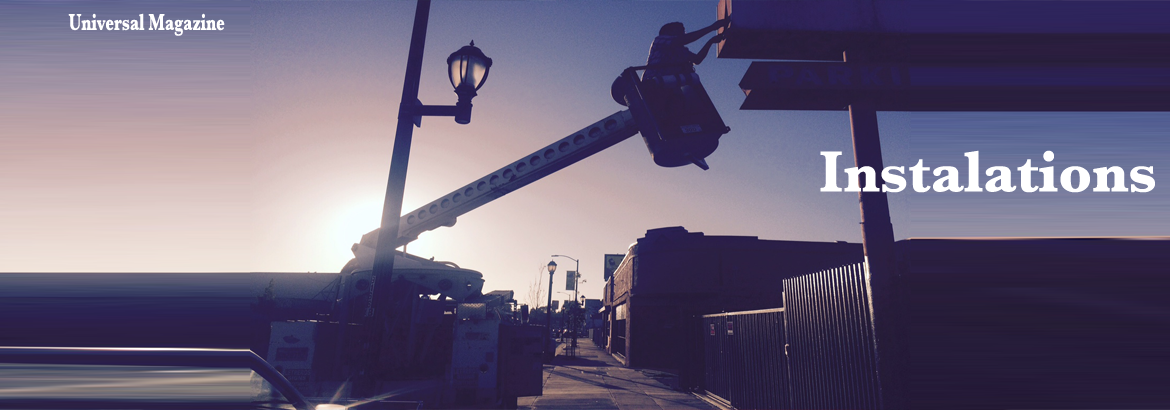
<style>
.page{position:relative;width:1170px;height:410px}
.page>*{position:absolute;margin:0}
.t1{font:23.6px "Baskerville-Bold";color:#ffffff;scale:0.7 1}
.t2{font:60px "Baskerville-Bold";color:#ffffff}
</style>
<div class="page">
<p class="t1" style="left:68px;top:13px;width:157px;height:23px">Universal Magazine</p>
<p class="t2" style="left:820px;top:150px;width:335px;height:43px">Instalations</p>
</div>
